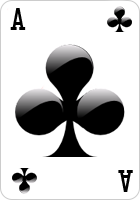
<style>
.page{position:relative;width:140px;height:200px;background:#ffffff}
.page>*{position:absolute;margin:0}
.t1{font:26px "CardCharacters";color:#000000}
</style>
<div class="page">
<p class="t1" style="left:10px;top:8px;width:16px;height:22px">a</p>
<p class="t1" style="left:118px;top:170px;width:15px;height:22px;rotate:180deg">a</p>
</div>
